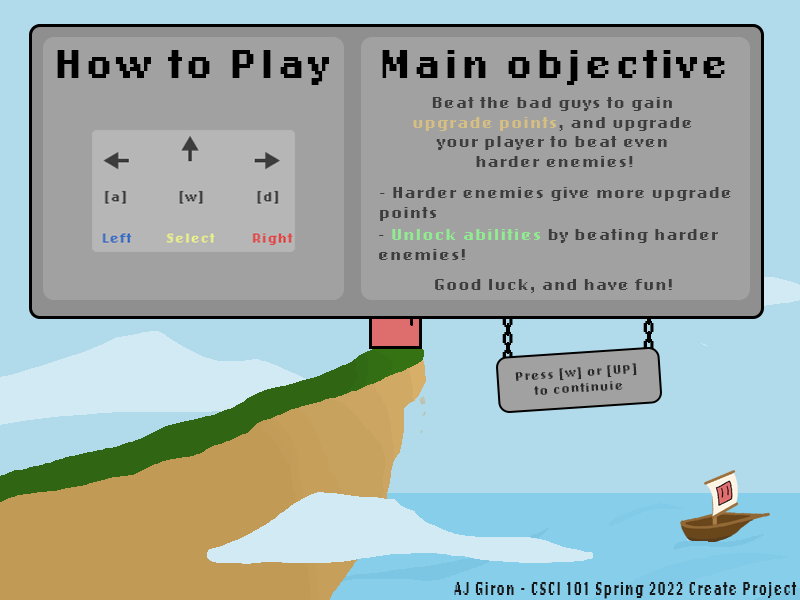
<style>
.page{position:relative;width:800px;height:600px;background:#a1a1a1}
.page>*{position:absolute;margin:0}
.t1{font:42px "LoRes12OT-Bold";letter-spacing:0.07em;color:#000000}
.t2{font:16.6px "LoRes12OT-Bold";letter-spacing:0.07em;color:#3d3d3d}
.t3{font:16.6px "LoRes12OT-Bold";letter-spacing:0.07em;color:#d6bf83}
.t4{font:16.6px "LoRes12OT-Bold";letter-spacing:0.07em;color:#91ec91}
.t5{font:20px "LoRes12OT-Bold";letter-spacing:0.07em;color:#000000}
.t6{font:12.8px "LoRes12OT-Bold";letter-spacing:0.07em;color:#282828}
</style>
<div class="page">
<p class="t1" style="left:57px;top:50px;width:272px;height:35px">How to Play</p>
<p class="t1" style="left:382px;top:50px;width:343px;height:35px">Main objective</p>
<p class="t2" style="left:413px;top:97px;width:279px;height:70px;text-align:center">Beat the bad guys to gain <br><span class="t3">upgrade points</span>, and upgrade <br>your player to beat even <br>harder enemies!</p>
<p class="t2" style="left:380px;top:187px;width:351px;height:34px">- Harder enemies give more upgrade <br>points</p>
<p class="t2" style="left:379px;top:229px;width:339px;height:31px">- <span class="t4">Unlock abilities</span> by beating harder<br>enemies!</p>
<p class="t2" style="left:435px;top:279px;width:237px;height:14px">Good luck, and have fun!</p>
<p class="t5" style="left:502px;top:314px;width:11px;height:13px">0</p>
<p class="t5" style="left:643px;top:321px;width:11px;height:13px">0</p>
<p class="t5" style="left:502px;top:332px;width:11px;height:13px">0</p>
<p class="t5" style="left:643px;top:339px;width:11px;height:13px">0</p>
<p class="t5" style="left:502px;top:350px;width:11px;height:13px">0</p>
<p class="t6" style="left:515px;top:363px;width:122px;height:32px;text-align:center;rotate:-4deg">Press [w] or [UP] <br>to continuie</p>
</div>
